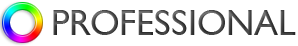
<style>
.page{position:relative;width:298px;height:46px;background:#ffffff}
.page>*{position:absolute;margin:0}
.t1{font:36px "GillSansMT";text-transform:uppercase}
</style>
<div class="page">
<p class="t1" style="left:53px;top:10px;width:243px;height:25px">Professional</p>
</div>
